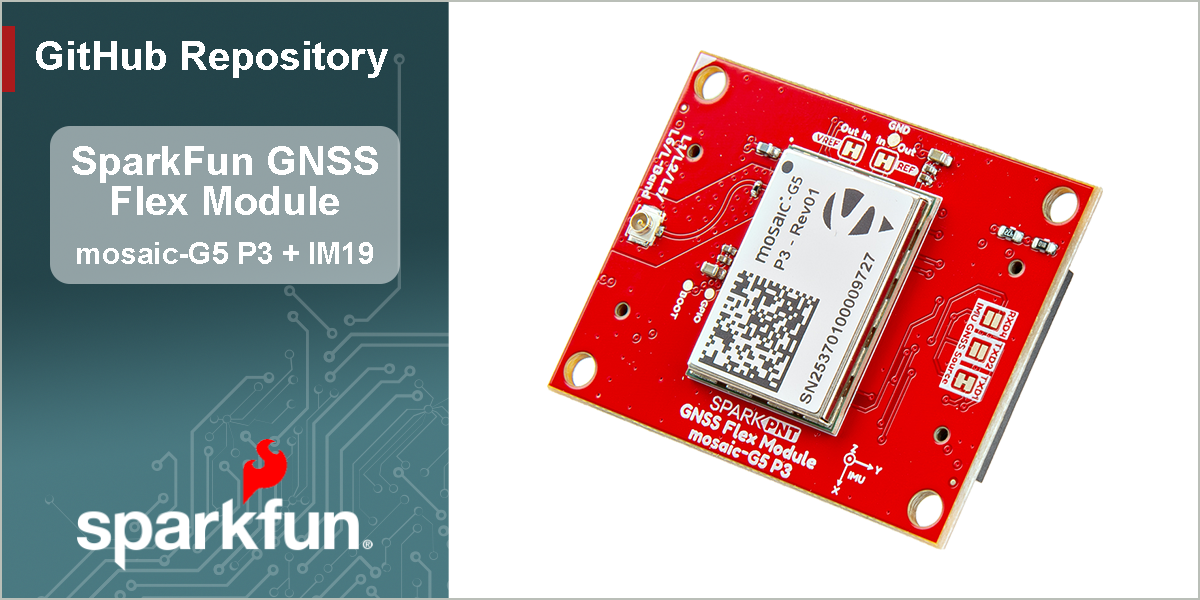
<style>
.page{position:relative;width:1200px;height:600px;background:#ffffff}
.page>*{position:absolute;margin:0}
.t1{font:40px "Arial-BoldMT";color:#ffffff}
.t2{font:30px "Arial-BoldMT";color:#ffffff}
</style>
<div class="page">
<p class="t1" style="left:36px;top:41px;width:352px;height:37px">GitHub Repository</p>
<p class="t1" style="left:72px;top:146px;width:306px;height:69px;text-align:center">SparkFun GNSS<br>Flex Module</p>
<p class="t2" style="left:77px;top:242px;width:296px;height:22px">mosaic-G5 P3 + IM19</p>
</div>
